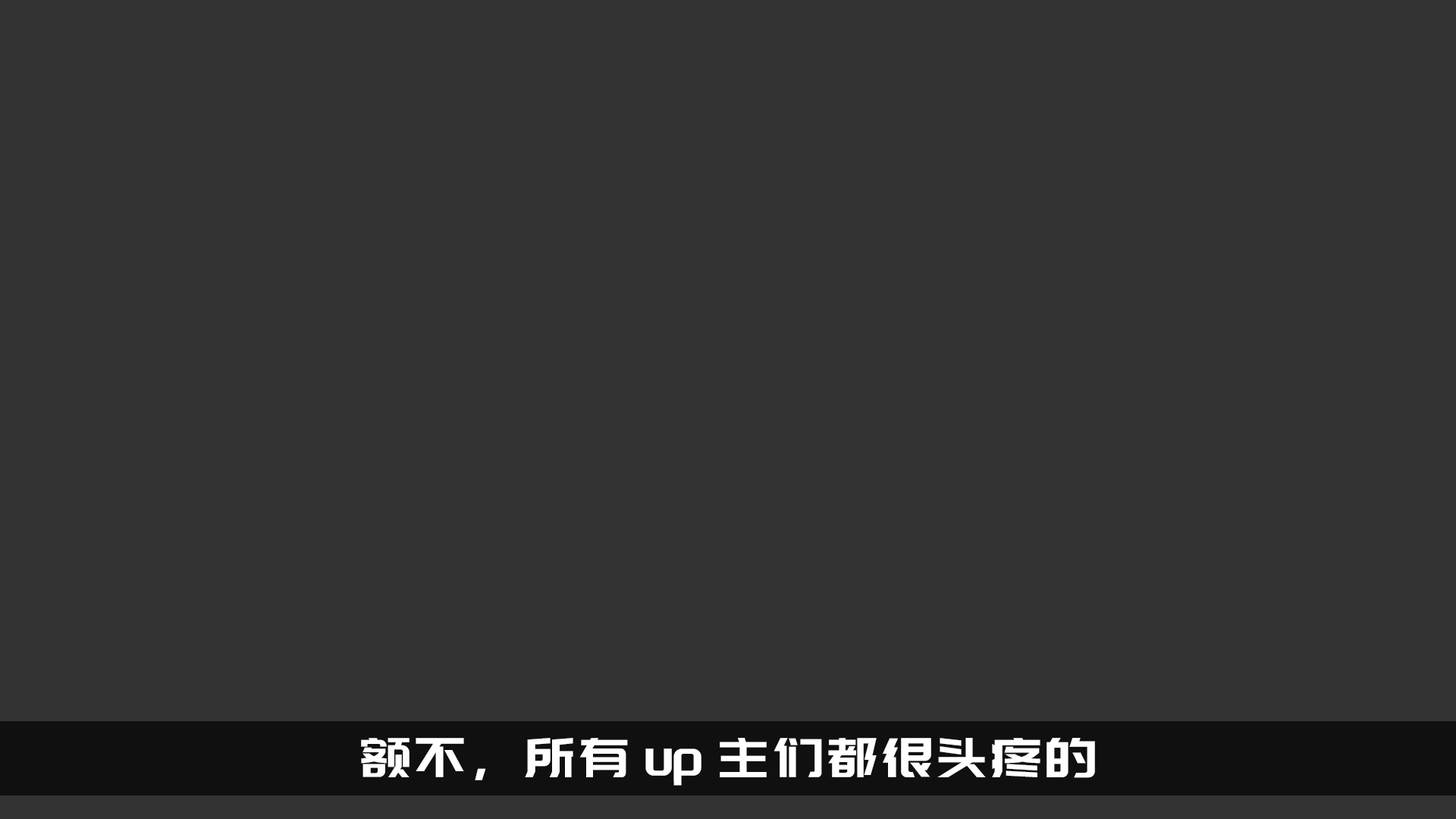
<style>
.page{position:relative;width:1456px;height:819px;background:#333333}
.page>*{position:absolute;margin:0}
.t1{font:54.6px "PangMenZhengDao-3";color:#ffffff}
</style>
<div class="page">
<p class="t1" style="left:361px;top:738px;width:734px;height:48px">额不，所有up主们都很头疼的</p>
</div>
